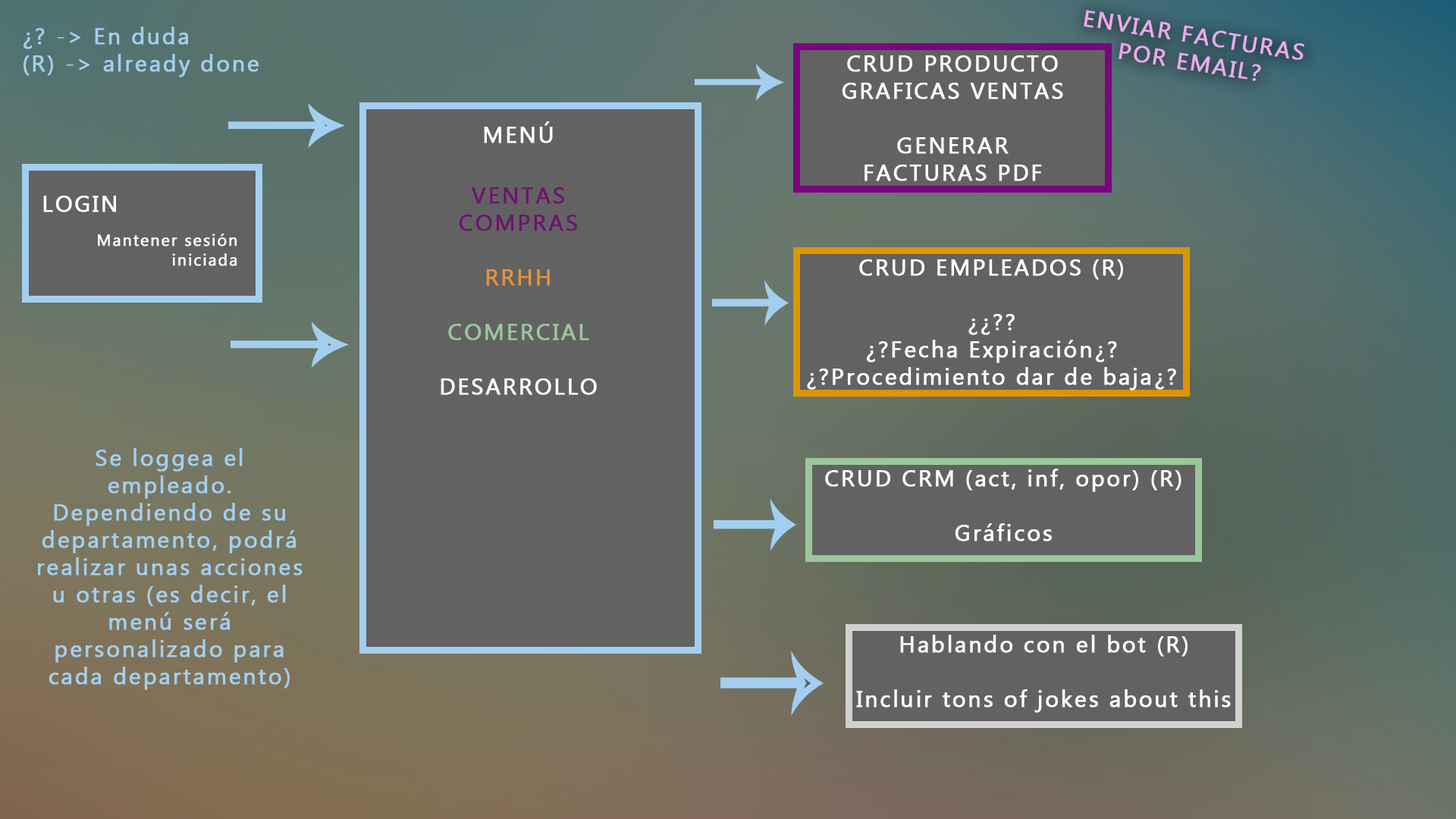
<style>
.page{position:relative;width:1456px;height:819px;background:#626262}
.page>*{position:absolute;margin:0}
.t1{font:22.7px "MicrosoftTaiLe";letter-spacing:0.075em;color:#eca9ee;font-weight:bold}
.t2{font:22.7px "MicrosoftTaiLe";letter-spacing:0.075em;color:#a2cff0;font-weight:bold}
.t3{font:22.7px "MicrosoftTaiLe";letter-spacing:0.075em;color:#ffffff;font-weight:bold}
.t4{font:22.7px "MicrosoftTaiLe";letter-spacing:0.075em;color:#6e1470;font-weight:bold}
.t5{font:22.7px "MicrosoftTaiLe";letter-spacing:0.075em;color:#e59239;font-weight:bold}
.t6{font:22.7px "MicrosoftTaiLe";letter-spacing:0.075em;color:#9bc79b;font-weight:bold}
.t7{font:16.2px "MicrosoftTaiLe";letter-spacing:0.075em;color:#ffffff;font-weight:bold}
</style>
<div class="page">
<p class="t1" style="left:1084px;top:10px;width:220px;height:71px;rotate:9deg">ENVIAR FACTURAS POR EMAIL?</p>
<p class="t2" style="left:24px;top:27px;width:235px;height:50px">¿? -&gt; En duda<br>(R) -&gt; already done</p>
<p class="t3" style="left:842px;top:55px;width:221px;height:126px;text-align:center">CRUD PRODUCTO<br>GRAFICAS VENTAS<br><br>GENERAR <br>FACTURAS PDF</p>
<p class="t3" style="left:484px;top:121px;width:69px;height:22px">MENÚ</p>
<p class="t3" style="left:43px;top:196px;width:73px;height:16px">LOGIN</p>
<p class="t4" style="left:441px;top:187px;width:156px;height:208px;text-align:center">VENTAS<br>COMPRAS<br><br><span class="t5">RRHH<br><br></span><span class="t6">COMERCIAL<br></span><span class="t3"><br>DESARROLLO</span></p>
<p class="t7" style="left:98px;top:234px;width:139px;height:32px;text-align:right">Mantener sesión<br> iniciada</p>
<p class="t3" style="left:807px;top:259px;width:369px;height:132px;text-align:center">CRUD EMPLEADOS (R)<br><br>¿¿??<br>¿?Fecha Expiración¿?<br>¿?Procedimiento dar de baja¿?</p>
<p class="t2" style="left:38px;top:448px;width:265px;height:242px;text-align:center">Se loggea el <br>empleado.<br>Dependiendo de su departamento, podrá realizar unas acciones u otras (es decir, el menú será <br>personalizado para cada departamento)</p>
<p class="t3" style="left:825px;top:469px;width:356px;height:72px;text-align:center">CRUD CRM (act, inf, opor) (R)<br><br>Gráficos</p>
<p class="t3" style="left:856px;top:635px;width:375px;height:78px;text-align:center">Hablando con el bot (R)<br><br>Incluir tons of jokes about this</p>
</div>
